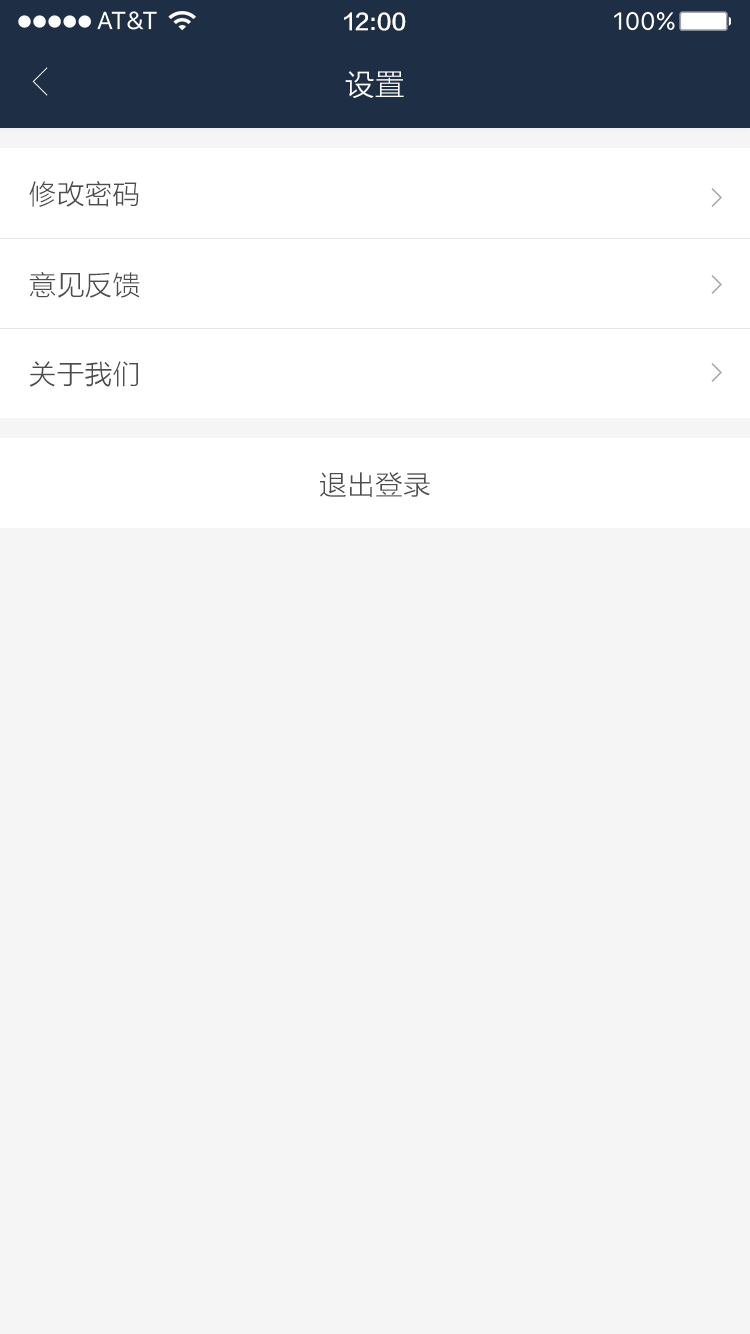
<style>
.page{position:relative;width:750px;height:1334px;background:#f5f5f5}
.page>*{position:absolute;margin:0}
.t1{font:22px "FZLTZHK--GBK1-0";color:#ffffff}
.t2{font:30px "FZLTXHK";color:#ffffff}
.t3{font:28px "FZLTXHK";color:#4d4d4d}
</style>
<div class="page">
<p class="t1" style="left:344px;top:12px;width:62px;height:19px">12:00</p>
<p class="t2" style="left:345px;top:71px;width:59px;height:27px">设置</p>
<p class="t3" style="left:29px;top:181px;width:110px;height:26px">修改密码</p>
<p class="t3" style="left:29px;top:271px;width:111px;height:27px">意见反馈</p>
<p class="t3" style="left:29px;top:361px;width:109px;height:26px">关于我们</p>
<p class="t3" style="left:320px;top:472px;width:110px;height:25px">退出登录</p>
</div>
